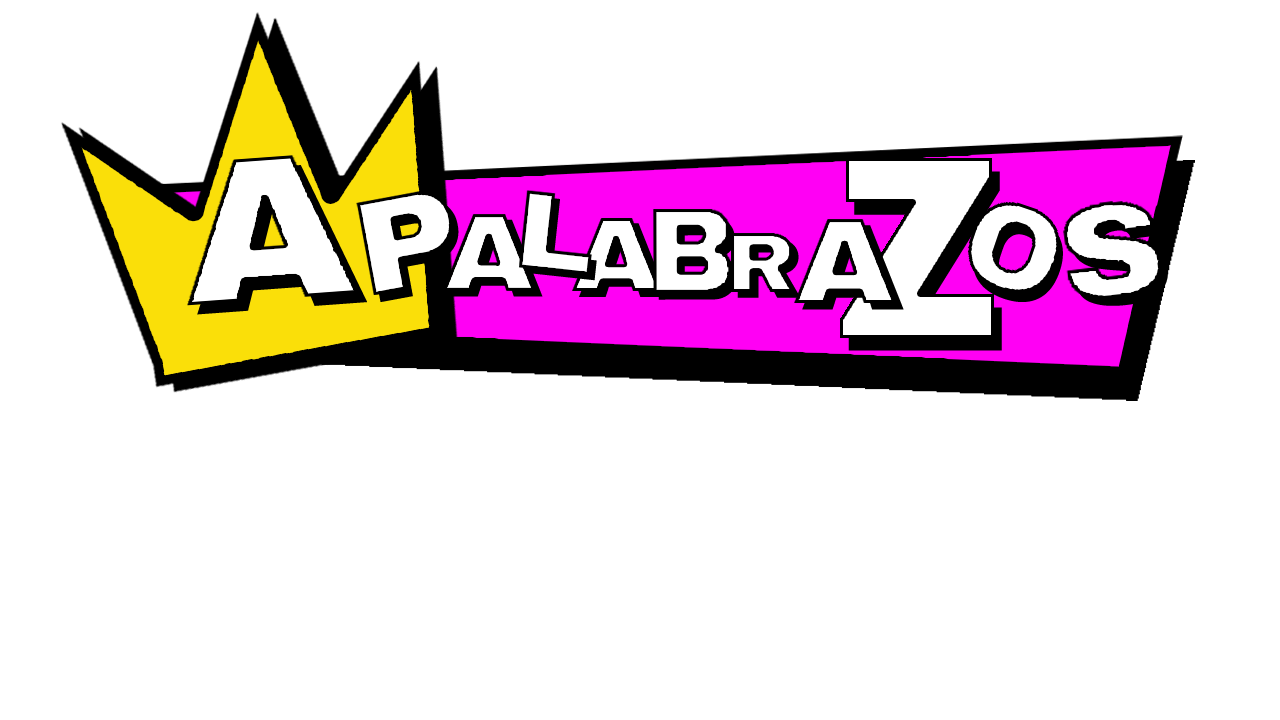
<style>
.page{position:relative;width:1280px;height:720px;background:#ffffff}
.page>*{position:absolute;margin:0}
.t1{font:205.4px "ArchivoBlack-Regular";color:#ffffff;scale:1.09 1}
.t2{font:111.7px "ArchivoBlack-Regular";scale:1.09 1}
.t3{font:135.6px "ArchivoBlack-Regular";scale:1.09 1}
.t4{font:122.1px "ArchivoBlack-Regular";scale:0.97 1}
.t5{font:84.8px "ArchivoBlack-Regular";scale:1.09 1}
</style>
<div class="page">
<p class="t1" style="left:197px;top:165px;width:170px;height:150px;rotate:-4deg">A</p>
<p class="t2" style="left:524px;top:196px;width:73px;height:85px;rotate:6deg">L</p>
<p class="t3" style="left:363px;top:199px;width:96px;height:103px;rotate:-10deg">P</p>
<p class="t4" style="left:973px;top:212px;width:90px;height:90px;rotate:19deg">O</p>
<p class="t5" style="left:737px;top:239px;width:64px;height:59px">R</p>
</div>
